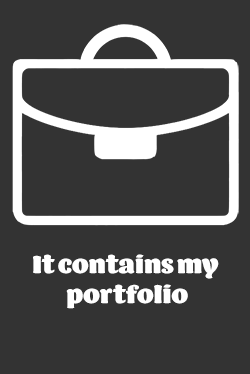
<style>
.page{position:relative;width:250px;height:374px;background:#333333}
.page>*{position:absolute;margin:0}
.t1{font:25px "BarricadaPro";color:#ffffff}
</style>
<div class="page">
<p class="t1" style="left:33px;top:254px;width:186px;height:55px;text-align:center">It contains my <br>portfolio</p>
</div>
